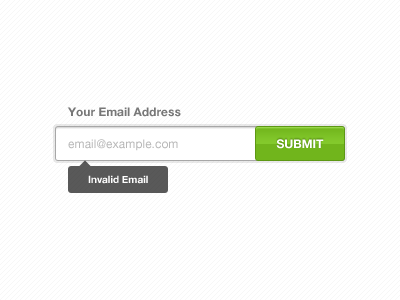
<style>
.page{position:relative;width:400px;height:300px;background:#ffffff}
.page>*{position:absolute;margin:0}
.t1{font:12px "HelveticaNeue-Bold";color:#777777}
.t2{font:12px "HelveticaNeue";color:#b8b8b8}
.t3{font:12px "HelveticaNeue-Bold";color:#ffffff}
.t4{font:10px "HelveticaNeue-Bold";color:#ffffff}
</style>
<div class="page">
<p class="t1" style="left:67px;top:107px;width:114px;height:10px">Your Email Address</p>
<p class="t2" style="left:68px;top:139px;width:110px;height:12px">email@example.com</p>
<p class="t3" style="left:276px;top:139px;width:48px;height:10px">SUBMIT</p>
<p class="t4" style="left:88px;top:175px;width:60px;height:9px">Invalid Email</p>
</div>
